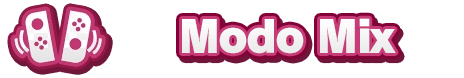
<style>
.page{position:relative;width:464px;height:78px;background:#ffffff}
.page>*{position:absolute;margin:0}
.t1{font:44px "RodinPro-UB";letter-spacing:-0.043em;color:#f5f4f5}
</style>
<div class="page">
<p class="t1" style="left:182px;top:18px;width:214px;height:36px">Modo Mix</p>
</div>
